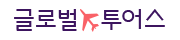
<style>
.page{position:relative;width:180px;height:40px;background:#ffffff}
.page>*{position:absolute;margin:0}
.t1{font:24px "BinggraeMelona";color:#3d155f}
</style>
<div class="page">
<p class="t1" style="left:14px;top:9px;width:151px;height:22px">글로벌   투어스</p>
</div>
